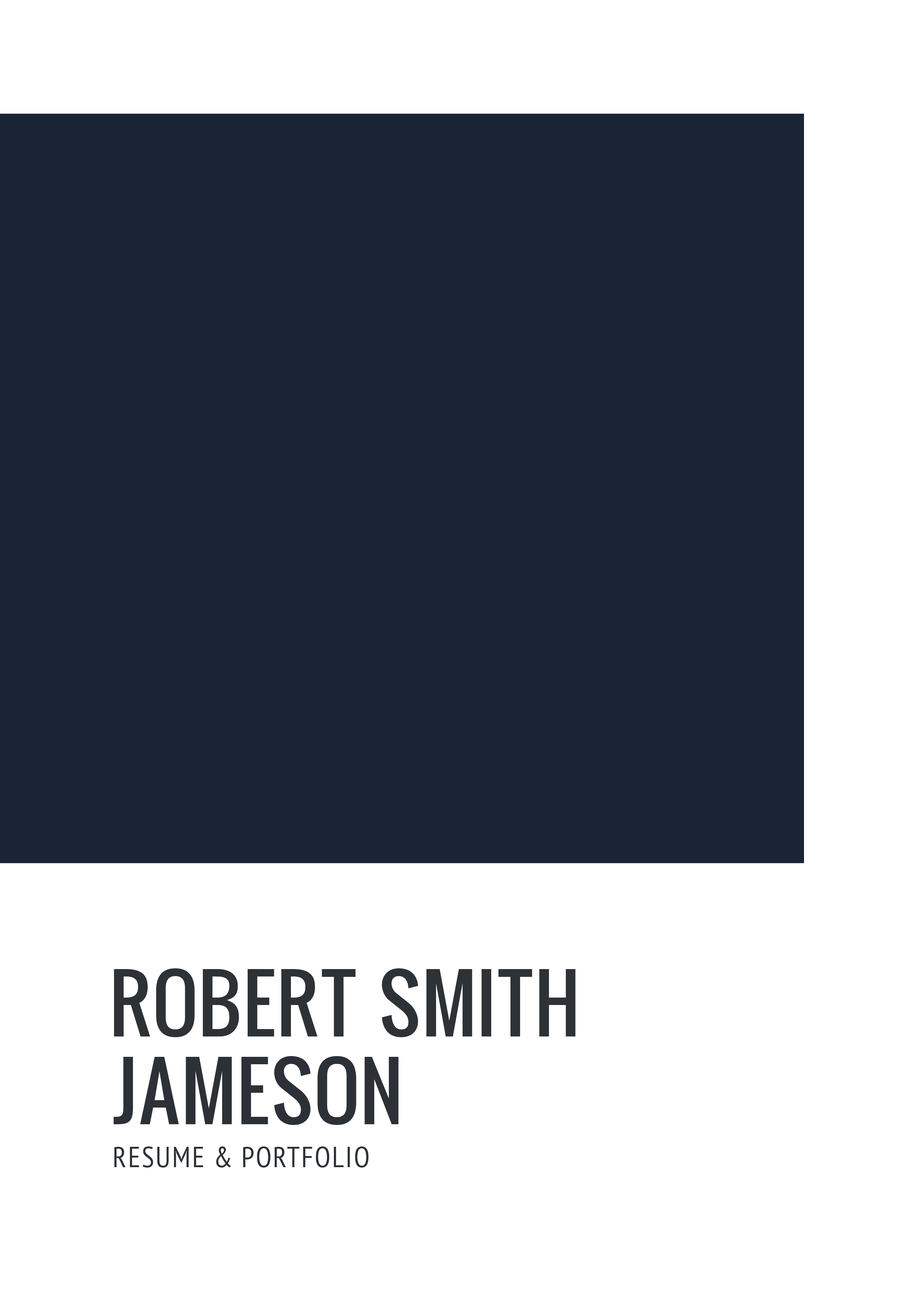
<style>
.page{position:relative;width:918px;height:1299px;background:#1b2434}
.page>*{position:absolute;margin:0}
.t1{font:76.9px "Oswald";color:#2d3237;text-transform:uppercase}
.t2{font:76.9px "Oswald";color:#2c3137;text-transform:uppercase}
.t3{font:82.3px "Oswald";color:#222222;text-transform:uppercase}
.t4{font:28.8px "PTSans-Narrow";letter-spacing:0.05em;color:#2c3137}
</style>
<div class="page">
<p class="t1" style="left:114px;top:968px;width:462px;height:69px">ROBERT Smith</p>
<p class="t2" style="left:114px;top:1056px;width:285px;height:69px"><span class="t3"><br></span>jAMESON</p>
<p class="t4" style="left:114px;top:1146px;width:255px;height:21px">RESUME &amp; PORTFOLIO</p>
</div>
